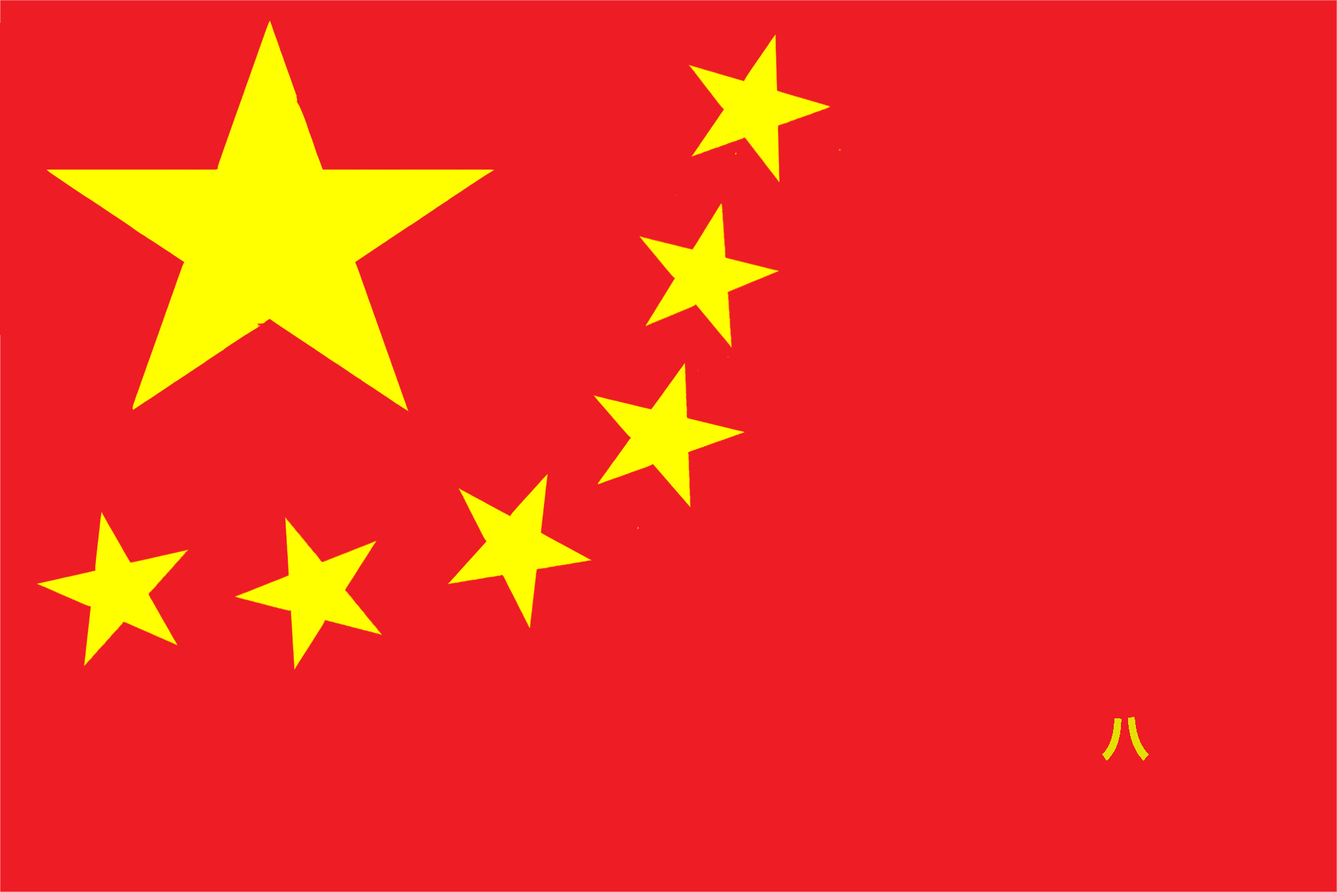
<style>
.page{position:relative;width:1337px;height:892px;background:#ee1c25}
.page>*{position:absolute;margin:0}
.t1{font:47px "MicrosoftYaHei-Bold";color:#e4e005}
</style>
<div class="page">
<p class="t1" style="left:1102px;top:717px;width:47px;height:44px">八</p>
</div>
